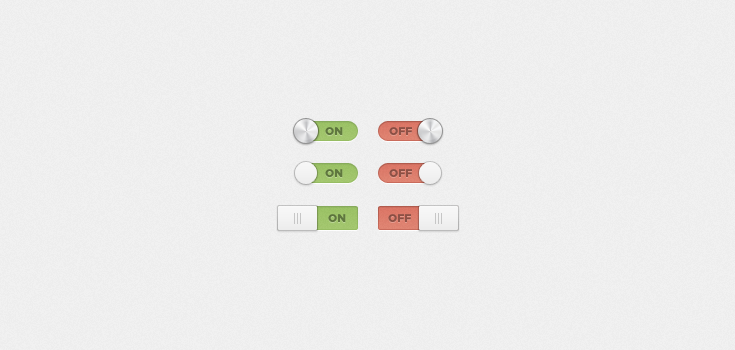
<style>
.page{position:relative;width:735px;height:350px;background:#ededed}
.page>*{position:absolute;margin:0}
.t1{font:11px "GothamBlack";color:#60783f;text-transform:uppercase}
.t2{font:11px "GothamBlack";color:#8f5247;text-transform:uppercase}
</style>
<div class="page">
<p class="t1" style="left:325px;top:127px;width:18px;height:8px">on</p>
<p class="t2" style="left:389px;top:127px;width:23px;height:8px">off</p>
<p class="t1" style="left:325px;top:169px;width:18px;height:8px">on</p>
<p class="t2" style="left:389px;top:169px;width:23px;height:8px">off</p>
<p class="t1" style="left:328px;top:214px;width:18px;height:8px">on</p>
<p class="t2" style="left:388px;top:214px;width:23px;height:8px">off</p>
</div>
